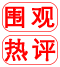
<style>
.page{position:relative;width:60px;height:67px;background:#ffffff}
.page>*{position:absolute;margin:0}
.t1{font:24px "STXihei";letter-spacing:0.14em;color:#ff0000;font-weight:bold}
</style>
<div class="page">
<p class="t1" style="left:5px;top:6px;width:50px;height:23px">围观</p>
<p class="t1" style="left:4px;top:38px;width:52px;height:24px">热评</p>
</div>
